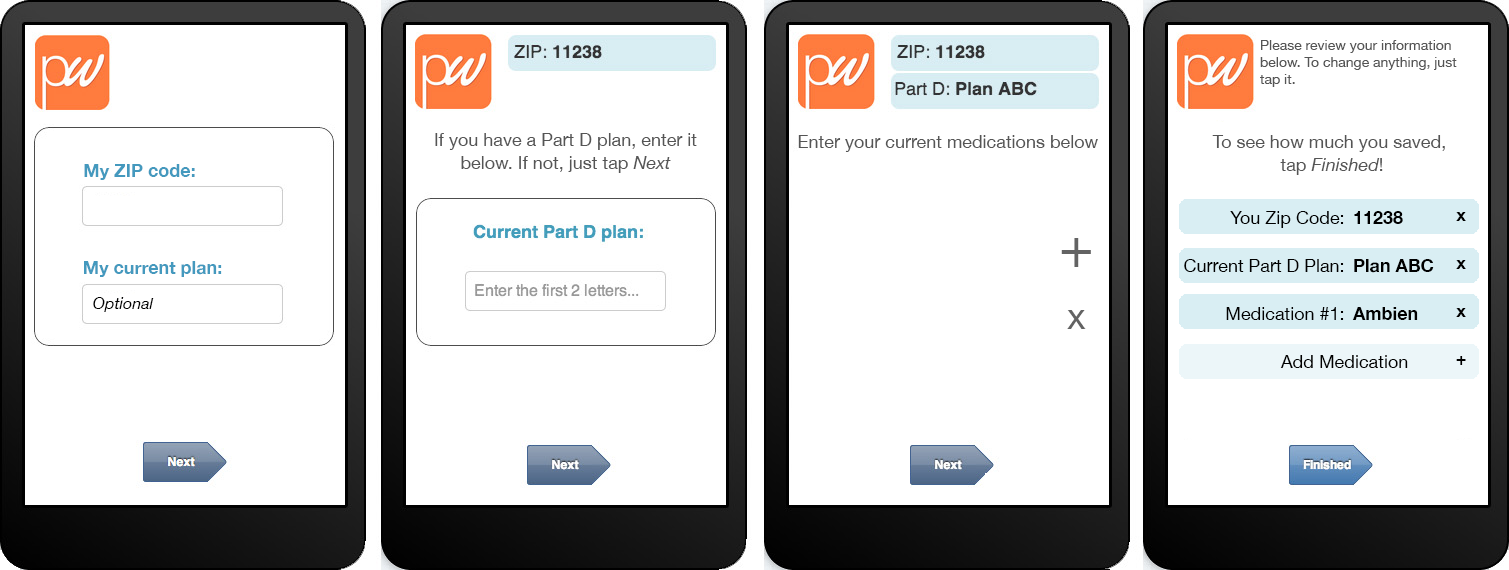
<style>
.page{position:relative;width:1509px;height:570px;background:#ffffff}
.page>*{position:absolute;margin:0}
.t1{font:14px/17.2px "HelveticaNeue";color:#555555}
.t2{font:18px/23.2px "HelveticaNeue";color:#555555}
.t3{font:18px/23.2px "HelveticaNeue-Italic";color:#555555}
.t4{font:18px "HelveticaNeue";color:#555555}
.t5{font:18px "HelveticaNeue-Bold";color:#4499be}
.t6{font:18px/48px "HelveticaNeue";color:#000000}
.t7{font:18px/48px "HelveticaNeue-Bold";color:#000000}
.t8{font:57.8px/62px "HelveticaNeue";color:#636363}
.t9{font:36px/62px "HelveticaNeue";color:#636363}
.t10{font:16px "HelveticaNeue-Italic";color:#000000}
</style>
<div class="page">
<p class="t1" style="left:1260px;top:40px;width:197px;height:47px">Please review your information below. To change anything, just tap it.</p>
<p class="t2" style="left:435px;top:133px;width:262px;height:40px;text-align:center">If you have a Part D plan, enter it below. If not, just tap <span class="t3">Next</span></p>
<p class="t4" style="left:798px;top:135px;width:300px;height:17px">Enter your current medications below</p>
<p class="t2" style="left:1212px;top:135px;width:233px;height:40px;text-align:center">To see how much you saved, <br>tap <span class="t3">Finished</span>!</p>
<p class="t5" style="left:84px;top:164px;width:111px;height:16px">My ZIP code:</p>
<p class="t6" style="left:1184px;top:211px;width:224px;height:157px;text-align:right">You Zip Code:<br>Current Part D Plan:<br>Medication #1:<br>Add Medication</p>
<p class="t7" style="left:1352px;top:211px;width:82px;height:109px">11238<br>Plan ABC<br>Ambien</p>
<p class="t7" style="left:1456px;top:212px;width:10px;height:153px;text-align:center">x<br>x<br>x<br>+</p>
<p class="t8" style="left:1061px;top:238px;width:30px;height:91px;text-align:center">+<br><span class="t9">x</span></p>
<p class="t5" style="left:84px;top:261px;width:138px;height:16px">My current plan:</p>
<p class="t10" style="left:93px;top:297px;width:61px;height:15px">Optional</p>
</div>
